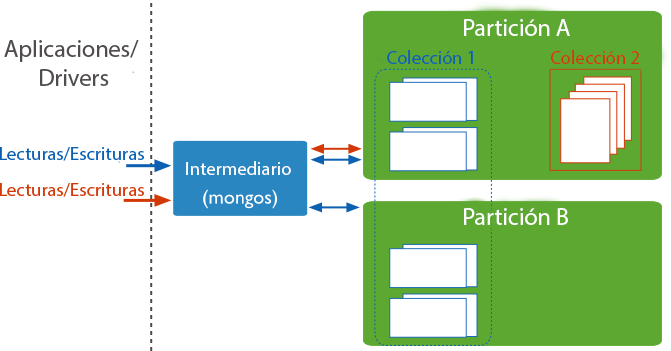
<style>
.page{position:relative;width:671px;height:351px;background:#ffffff}
.page>*{position:absolute;margin:0}
.t1{font:24px "MyriadPro-Regular";color:#ffffff}
.t2{font:24px "MyriadPro-Regular";color:#4f4c4b}
.t3{font:18.7px "MyriadPro-Regular";color:#0c60b2}
.t4{font:18.7px "MyriadPro-Regular";color:#d33907}
.t5{font:18.7px "MyriadPro-Regular";color:#ffffff}
</style>
<div class="page">
<p class="t1" style="left:464px;top:19px;width:106px;height:17px">Partición A</p>
<p class="t2" style="left:4px;top:40px;width:135px;height:46px;text-align:center">Aplicaciones/ <br>Drivers</p>
<p class="t3" style="left:387px;top:50px;width:86px;height:14px">Colección 1</p>
<p class="t4" style="left:551px;top:50px;width:88px;height:14px">Colección 2</p>
<p class="t3" style="left:0px;top:147px;width:144px;height:14px">Lecturas/Escrituras</p>
<p class="t5" style="left:186px;top:161px;width:105px;height:14px">Intermediario</p>
<p class="t4" style="left:0px;top:183px;width:144px;height:14px">Lecturas/Escrituras</p>
<p class="t1" style="left:464px;top:208px;width:104px;height:17px">Partición B</p>
</div>
